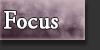
<style>
.page{position:relative;width:100px;height:50px}
.page>*{position:absolute;margin:0}
.t1{font:25.2px "AGaramondPro-Regular";color:#ffffff;font-weight:bold;scale:0.92 1}
</style>
<div class="page">
<p class="t1" style="left:4px;top:11px;width:54px;height:18px">Focus</p>
</div>
